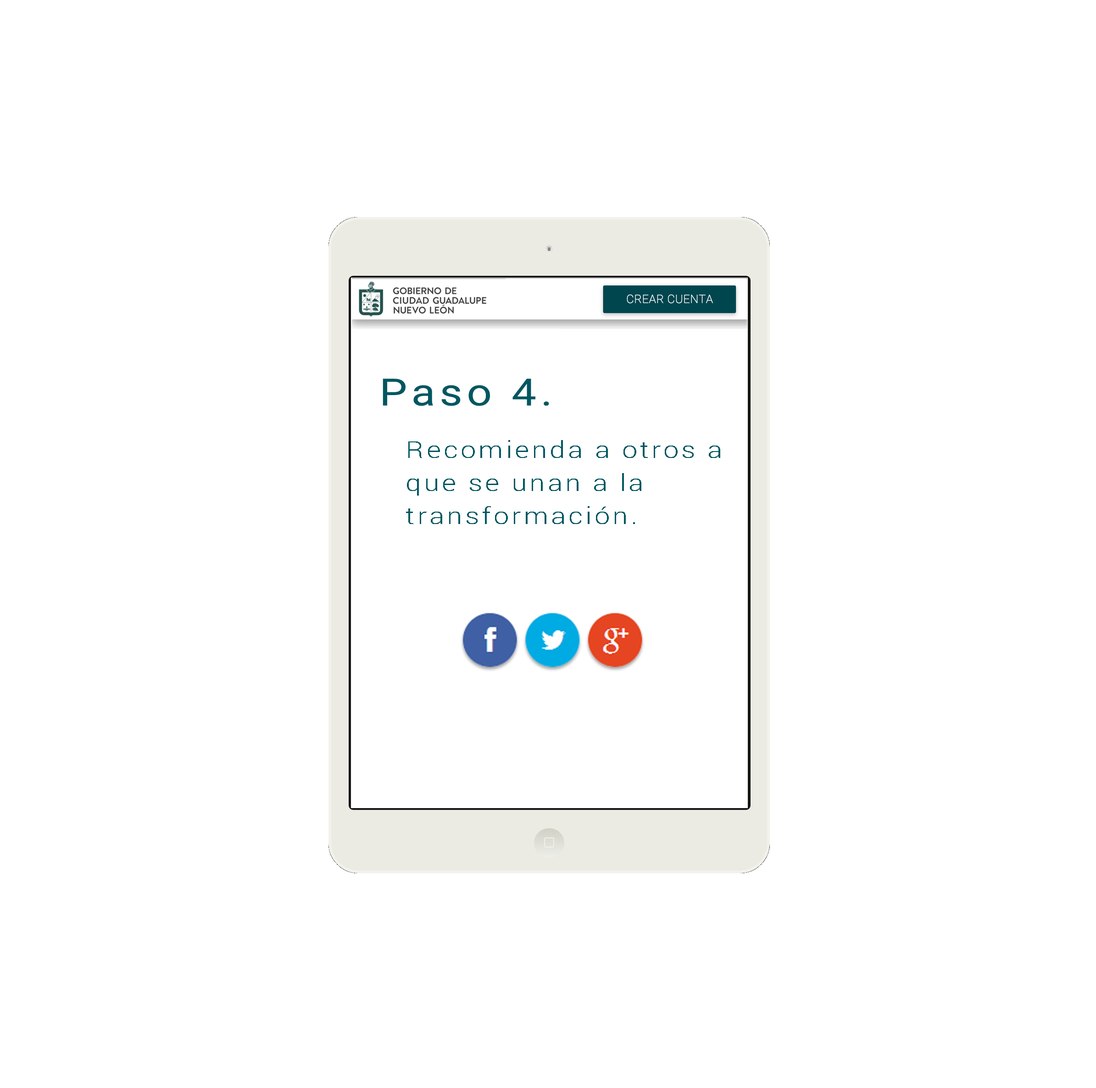
<style>
.page{position:relative;width:1096px;height:1088px;background:#ffffff}
.page>*{position:absolute;margin:0}
.t1{font:37.4px "Roboto-Regular2000980";letter-spacing:0.1em;color:#005761;scale:1.18 1}
.t2{font:23.4px "Roboto-Light1200310";letter-spacing:0.1em;color:#005761;scale:1.18 1}
</style>
<div class="page">
<p class="t1" style="left:383px;top:379px;width:166px;height:27px">Paso 4.</p>
<p class="t2" style="left:406px;top:440px;width:314px;height:84px">Recomienda a otros a que se unan a la transformación.</p>
</div>
